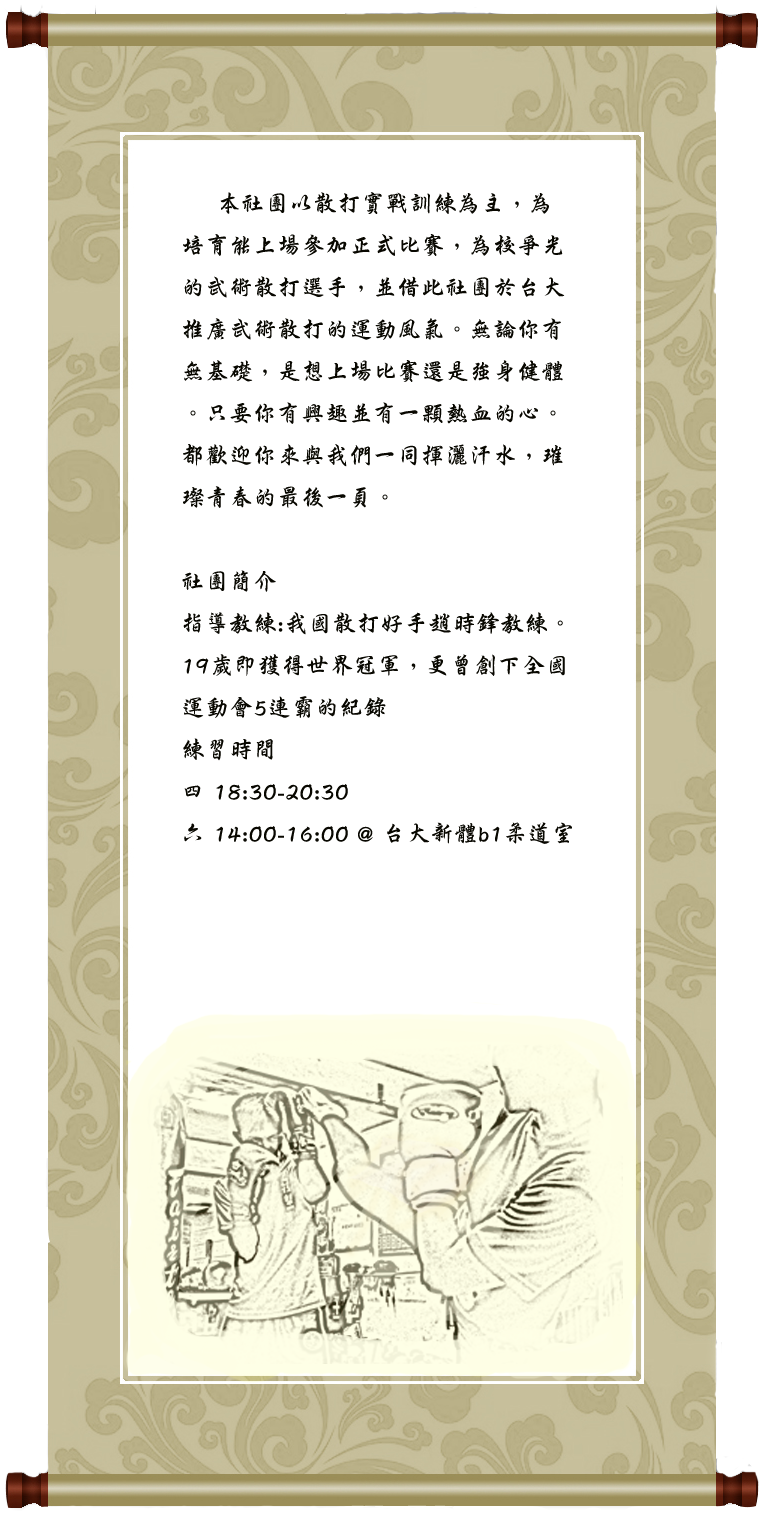
<style>
.page{position:relative;width:760px;height:1530px;background:#ffffff}
.page>*{position:absolute;margin:0}
.t1{font:24px "DFXingKai-W5-WINP-BF";color:#080700}
</style>
<div class="page">
<p class="t1" style="left:182px;top:192px;width:390px;height:652px">本社團以散打實戰訓練為主，為<br>培育能上場參加正式比賽，為校爭光<br>的武術散打選手，並借此社團於台大<br>推廣武術散打的運動風氣。無論你有<br>無基礎，是想上場比賽還是強身健體<br>。只要你有興趣並有一顆熱血的心。<br>都歡迎你來與我們一同揮灑汗水，璀<br>璨青春的最後一頁。<br><br>社團簡介<br>指導教練:我國散打好手趙時鋒教練。<br>19歲即獲得世界冠軍，更曾創下全國<br>運動會5連霸的紀錄<br>練習時間 <br>四 18:30-20:30<br>六 14:00-16:00 @ 台大新體b1柔道室</p>
</div>
